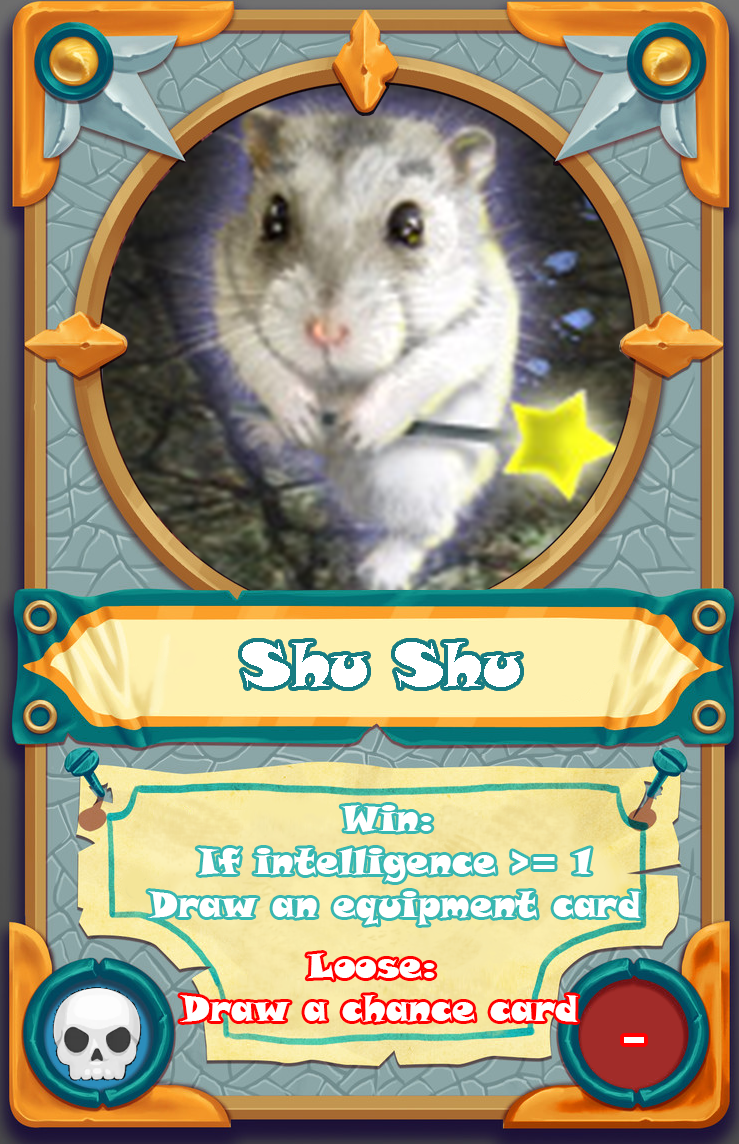
<style>
.page{position:relative;width:739px;height:1144px}
.page>*{position:absolute;margin:0}
.t1{font:60px "SnapITC-Regular";color:#ffffff}
.t2{font:36px "SnapITC-Regular";color:#ffffff}
</style>
<div class="page">
<p class="t1" style="left:242px;top:642px;width:278px;height:45px">Shu Shu</p>
<p class="t2" style="left:148px;top:805px;width:493px;height:120px;text-align:center">Win: <br>If intelligence &gt;= 1<br>Draw an equipment card</p>
<p class="t2" style="left:180px;top:953px;width:398px;height:69px;text-align:center">Loose: <br>Draw a chance card</p>
</div>
